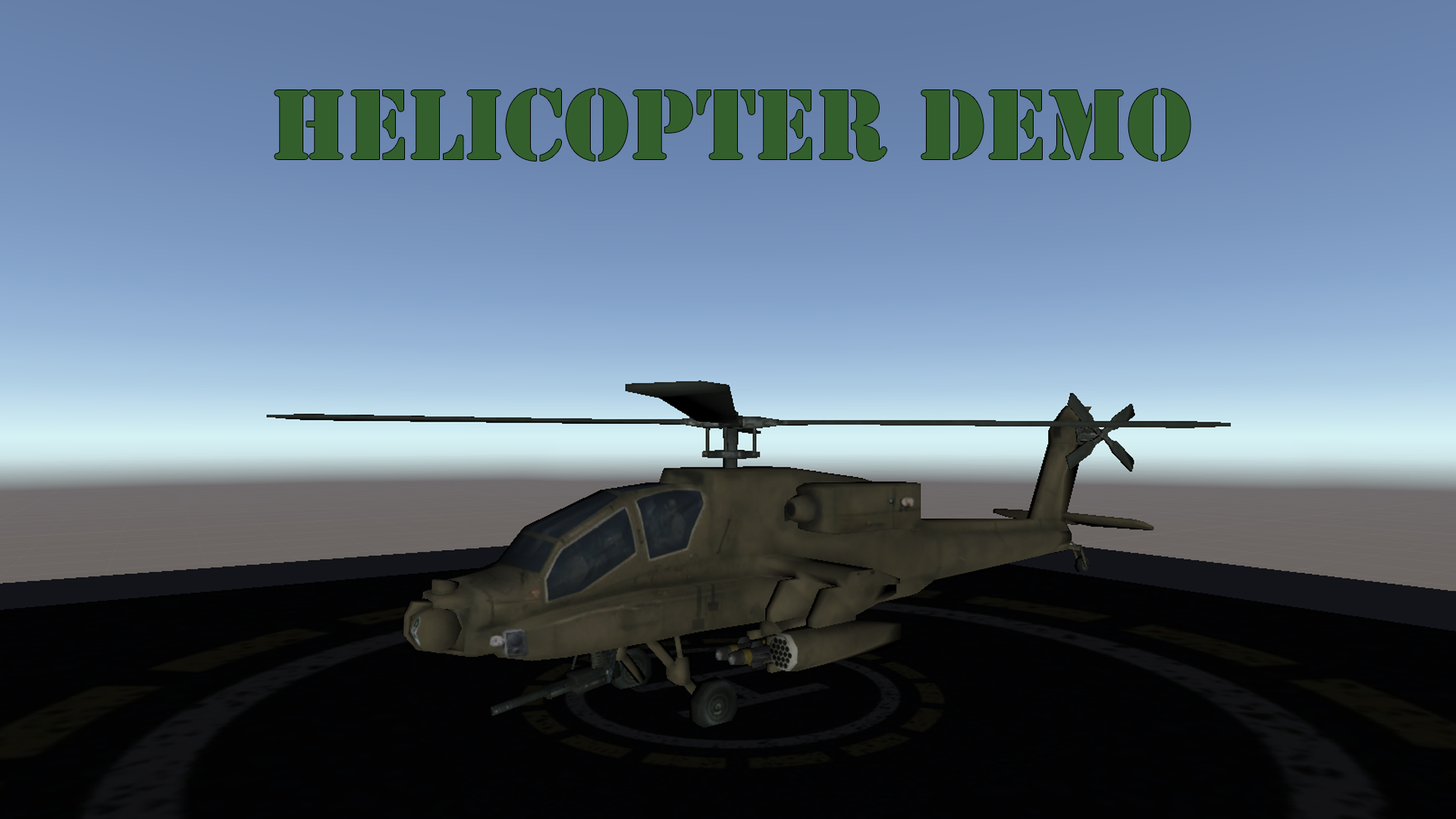
<style>
.page{position:relative;width:1456px;height:819px}
.page>*{position:absolute;margin:0}
.t1{font:92.1px "StencilStd";color:#335f2d}
</style>
<div class="page">
<p class="t1" style="left:275px;top:89px;width:916px;height:72px">Helicopter Demo</p>
</div>
